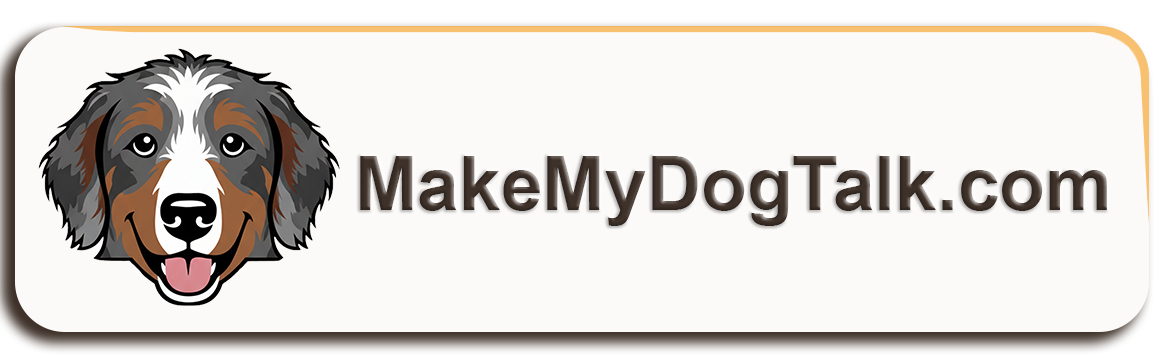
<style>
.page{position:relative;width:1170px;height:361px;background:#fcfaf8}
.page>*{position:absolute;margin:0}
.t1{font:75px "Arial-BoldMT";color:#3e3129}
</style>
<div class="page">
<p class="t1" style="left:360px;top:156px;width:747px;height:70px">MakeMyDogTalk.com</p>
</div>
